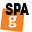
<style>
.page{position:relative;width:32px;height:32px;background:#ffffff}
.page>*{position:absolute;margin:0}
.t1{font:17.2px "Arial-Black";color:#000000;scale:0.64 1}
</style>
<div class="page">
<p class="t1" style="left:5px;top:3px;width:24px;height:12px">SPA</p>
</div>
